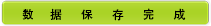
<style>
.page{position:relative;width:211px;height:26px}
.page>*{position:absolute;margin:0}
.t1{font:12px "AdobeHeitiStd-Regular";color:#000000}
</style>
<div class="page">
<p class="t1" style="left:22px;top:8px;width:164px;height:13px">数      据       保       存       完       成</p>
</div>
